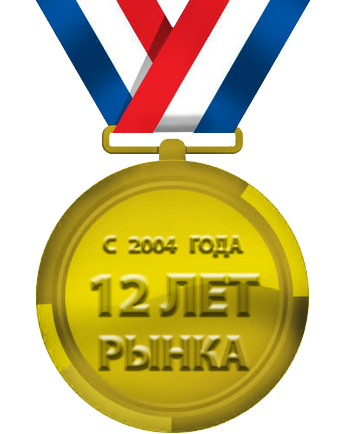
<style>
.page{position:relative;width:346px;height:434px;background:#ffffff}
.page>*{position:absolute;margin:0}
.t1{font:21.4px "MyriadPro-Bold"}
.t2{font:56px "MyriadPro-Bold"}
.t3{font:44.2px "MyriadPro-Bold"}
</style>
<div class="page">
<p class="t1" style="left:104px;top:237px;width:139px;height:19px">С   2004   ГОДА</p>
<p class="t2" style="left:92px;top:276px;width:166px;height:38px">12 ЛЕТ</p>
<p class="t3" style="left:101px;top:338px;width:146px;height:30px">РЫНКА</p>
</div>
